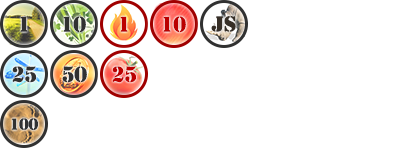
<style>
.page{position:relative;width:400px;height:150px;background:#ffffff}
.page>*{position:absolute;margin:0}
.t1{font:20px "StencilStd";color:#313131}
.t2{font:20px "StencilStd";color:#bc0000}
.t3{font:20px "StencilStd";color:#bb0000}
.t4{font:20px "StencilStd";color:#372f27}
.t5{font:15px "StencilStd";color:#313131}
</style>
<div class="page">
<p class="t1" style="left:20px;top:16px;width:8px;height:16px">1</p>
<p class="t1" style="left:63px;top:16px;width:23px;height:17px">10</p>
<p class="t2" style="left:120px;top:16px;width:8px;height:16px">1</p>
<p class="t3" style="left:163px;top:16px;width:23px;height:17px">10</p>
<p class="t4" style="left:211px;top:16px;width:25px;height:16px">JS</p>
<p class="t1" style="left:12px;top:66px;width:24px;height:17px">25</p>
<p class="t1" style="left:62px;top:66px;width:25px;height:17px">50</p>
<p class="t3" style="left:112px;top:66px;width:24px;height:17px">25</p>
<p class="t5" style="left:11px;top:118px;width:27px;height:12px">100</p>
</div>
